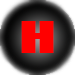
<style>
.page{position:relative;width:75px;height:75px}
.page>*{position:absolute;margin:0}
.t1{font:40px "Impact";color:#ff0000;scale:1.67 1}
</style>
<div class="page">
<p class="t1" style="left:21px;top:21px;width:33px;height:32px">H</p>
</div>
